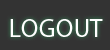
<style>
.page{position:relative;width:110px;height:50px;background:#333333}
.page>*{position:absolute;margin:0}
.t1{font:26px "MyriadPro-Regular";color:#ffffff;text-transform:uppercase}
</style>
<div class="page">
<p class="t1" style="left:10px;top:19px;width:93px;height:18px">LOGOUT</p>
</div>
